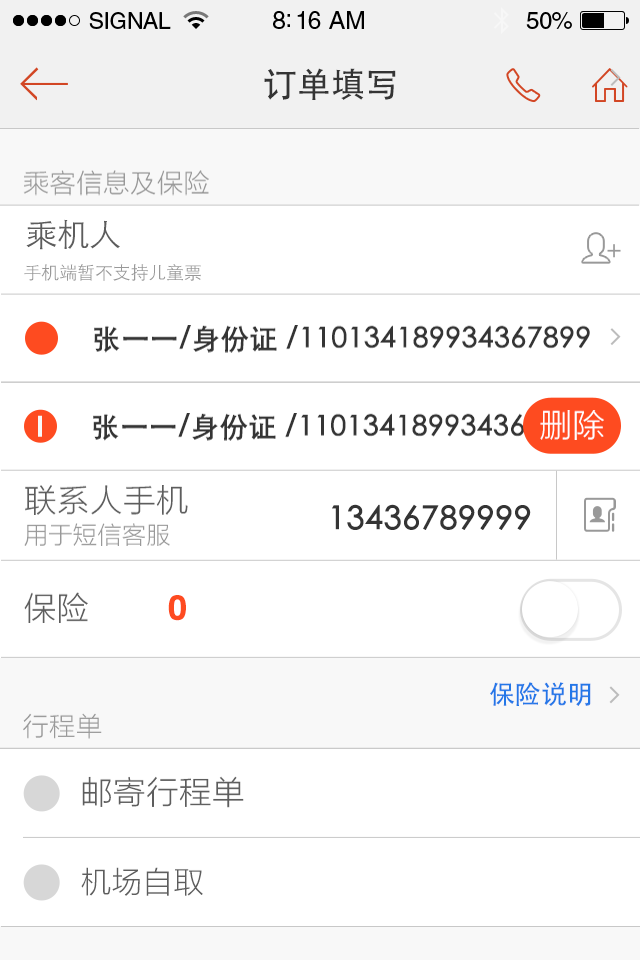
<style>
.page{position:relative;width:640px;height:960px;background:#ffffff}
.page>*{position:absolute;margin:0}
.t1{font:34px "STHeitiSC-Medium";color:#343434}
.t2{font:26px "STHeitiSC-Light";color:#999999}
.t3{font:32px "STHeitiSC-Light";color:#5d5d5d}
.t4{font:18px "STHeitiSC-Light";letter-spacing:-0.01em;color:#999999}
.t5{font:28px "STHeitiSC-Medium";color:#343434;font-weight:bold}
.t6{font:32px "STHeitiSC-Light";color:#ffffff}
.t7{font:32px "STHeitiSC-Medium";color:#343434;font-weight:bold}
.t8{font:24px "STHeitiSC-Light";letter-spacing:-0.01em;color:#999999}
.t9{font:34px "Helvetica-Bold";letter-spacing:-0.04em;color:#fe4b20;font-weight:bold}
.t10{font:26px "STHeitiSC-Medium";color:#2377e8}
.t11{font:30px "STHeitiSC-Light";color:#5d5d5d}
</style>
<div class="page">
<p class="t1" style="left:264px;top:68px;width:132px;height:32px">订单填写</p>
<p class="t2" style="left:23px;top:170px;width:186px;height:26px">乘客信息及保险</p>
<p class="t3" style="left:26px;top:219px;width:94px;height:31px">乘机人</p>
<p class="t4" style="left:24px;top:264px;width:177px;height:17px">手机端暂不支持儿童票</p>
<p class="t5" style="left:94px;top:325px;width:496px;height:28px">张一一/身份证 /110134189934367899</p>
<p class="t5" style="left:93px;top:413px;width:496px;height:28px">张一一/身份证 /110134189934367899</p>
<p class="t6" style="left:540px;top:410px;width:64px;height:30px">删除</p>
<p class="t3" style="left:25px;top:485px;width:163px;height:30px">联系人手机</p>
<p class="t7" style="left:332px;top:504px;width:199px;height:26px">13436789999</p>
<p class="t8" style="left:24px;top:523px;width:146px;height:23px">用于短信客服</p>
<p class="t3" style="left:24px;top:592px;width:64px;height:31px">保险</p>
<p class="t9" style="left:168px;top:595px;width:18px;height:26px">0</p>
<p class="t10" style="left:490px;top:682px;width:101px;height:24px">保险说明</p>
<p class="t2" style="left:23px;top:713px;width:79px;height:26px">行程单</p>
<p class="t3" style="left:82px;top:776px;width:162px;height:32px">邮寄行程单</p>
<p class="t3" style="left:82px;top:776px;width:162px;height:32px">邮寄行程单</p>
<p class="t11" style="left:81px;top:867px;width:122px;height:29px">机场自取</p>
<p class="t11" style="left:81px;top:867px;width:122px;height:29px">机场自取</p>
</div>
